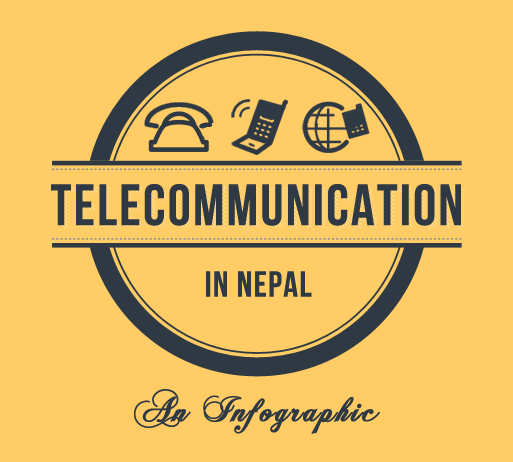
<style>
.page{position:relative;width:513px;height:462px;background:#ffcc66}
.page>*{position:absolute;margin:0}
.t1{font:58px "BebasNeue";letter-spacing:0.04em;color:#2f3943}
.t2{font:36px "BebasNeue";letter-spacing:0.04em;color:#2f3943}
.t3{font:36px "ChopinScript";letter-spacing:0.04em;color:#2f3943;font-weight:bold}
</style>
<div class="page">
<p class="t1" style="left:51px;top:184px;width:410px;height:42px">TELECOMMUNICATION</p>
<p class="t2" style="left:206px;top:271px;width:106px;height:26px">In Nepal</p>
<p class="t3" style="left:134px;top:389px;width:246px;height:45px">An Infographic</p>
</div>
